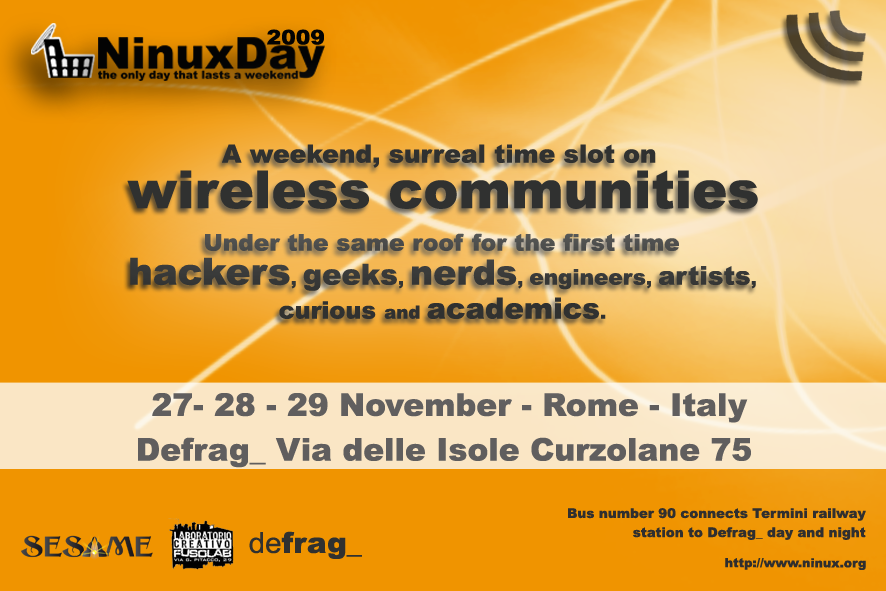
<style>
.page{position:relative;width:886px;height:591px}
.page>*{position:absolute;margin:0}
.t1{font:20.2px "Arial-Black";color:#030303;scale:1.08 1}
.t2{font:25px/45.6px "Arial-Black";color:#303130}
.t3{font:52.6px/45.6px "Arial-Black";color:#303130}
.t4{font:23.2px/34px "Arial-Black";color:#303130}
.t5{font:37.3px/34px "Arial-Black";color:#303130}
.t6{font:18.2px/34px "Arial-Black";color:#303130}
.t7{font:29px/34px "Arial-Black";color:#303130}
.t8{font:34.8px/34px "Arial-Black";color:#303130}
.t9{font:21.5px/34px "Arial-Black";color:#303130}
.t10{font:25.7px/34px "Arial-Black";color:#303130}
.t11{font:24px/34px "Arial-Black";color:#303130}
.t12{font:29.2px/34px "Arial-Black";color:#303130}
.t13{font:31.3px/44.8px "Arial-Black";color:#605e5e}
.t14{font:13.3px/19.1px "Arial-Black";color:#302f2f}
.t15{font:28.9px "Arial-Black";color:#303130}
.t16{font:28.9px "ArialMT";color:#303130}
.t17{font:12.5px "Arial-Black";color:#2f2e2e}
</style>
<div class="page">
<p class="t1" style="left:267px;top:29px;width:57px;height:16px">2009</p>
<p class="t2" style="left:127px;top:144px;width:631px;height:65px;text-align:center">A weekend, surreal time slot on <br><span class="t3">wireless communities</span></p>
<p class="t4" style="left:130px;top:233px;width:626px;height:86px;text-align:center">Under the same roof for the first time <br><span class="t5">hackers</span><span class="t6">, </span><span class="t7">geeks</span><span class="t6">, </span><span class="t8">nerds</span><span class="t6">, </span><span class="t9">engineers</span><span class="t6">, </span><span class="t10">artists</span><span class="t6">, <br></span><span class="t11">curious </span><span class="t6">and </span><span class="t12">academics</span><span class="t6">.</span></p>
<p class="t13" style="left:138px;top:393px;width:613px;height:75px;text-align:center">27- 28 - 29 November - Rome - Italy<br>Defrag_ Via delle Isole Curzolane 75</p>
<p class="t14" style="left:568px;top:508px;width:298px;height:32px;text-align:right">Bus number 90 connects Termini railway <br>station to Defrag_ day and night</p>
<p class="t15" style="left:249px;top:531px;width:113px;height:28px"><span class="t16">de</span>frag_</p>
<p class="t17" style="left:725px;top:558px;width:141px;height:12px">http://www.ninux.org</p>
</div>
